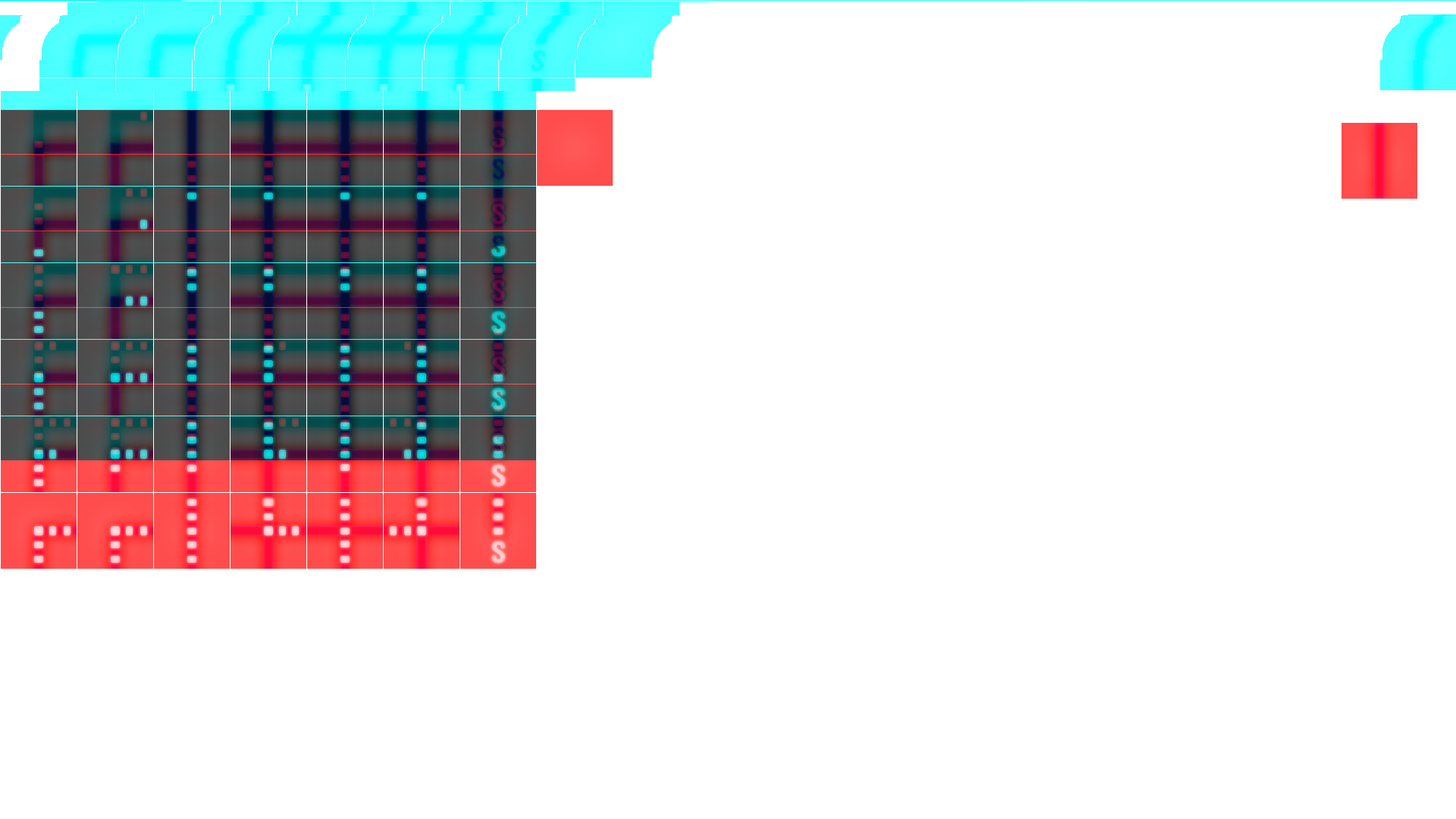
<style>
.page{position:relative;width:1456px;height:819px;background:#ffffff}
.page>*{position:absolute;margin:0}
.t1{font:31.1px "ConcertOne-Regular"}
.t2{font:31.1px "ConcertOne-Regular";color:#5a0d3b}
</style>
<div class="page">
<p class="t1" style="left:491px;top:125px;width:15px;height:23px">S</p>
<p class="t1" style="left:491px;top:125px;width:15px;height:23px">S</p>
<p class="t2" style="left:491px;top:202px;width:15px;height:22px">S</p>
<p class="t2" style="left:491px;top:202px;width:15px;height:22px">S</p>
<p class="t2" style="left:491px;top:202px;width:15px;height:22px">S</p>
<p class="t2" style="left:491px;top:278px;width:15px;height:23px">S</p>
<p class="t2" style="left:491px;top:278px;width:15px;height:23px">S</p>
<p class="t2" style="left:491px;top:278px;width:15px;height:23px">S</p>
<p class="t1" style="left:491px;top:355px;width:15px;height:23px">S</p>
<p class="t1" style="left:491px;top:355px;width:15px;height:23px">S</p>
<p class="t1" style="left:491px;top:355px;width:15px;height:23px">S</p>
<p class="t1" style="left:491px;top:431px;width:15px;height:23px">S</p>
<p class="t1" style="left:491px;top:431px;width:15px;height:23px">S</p>
<p class="t1" style="left:491px;top:431px;width:15px;height:23px">S</p>
</div>
